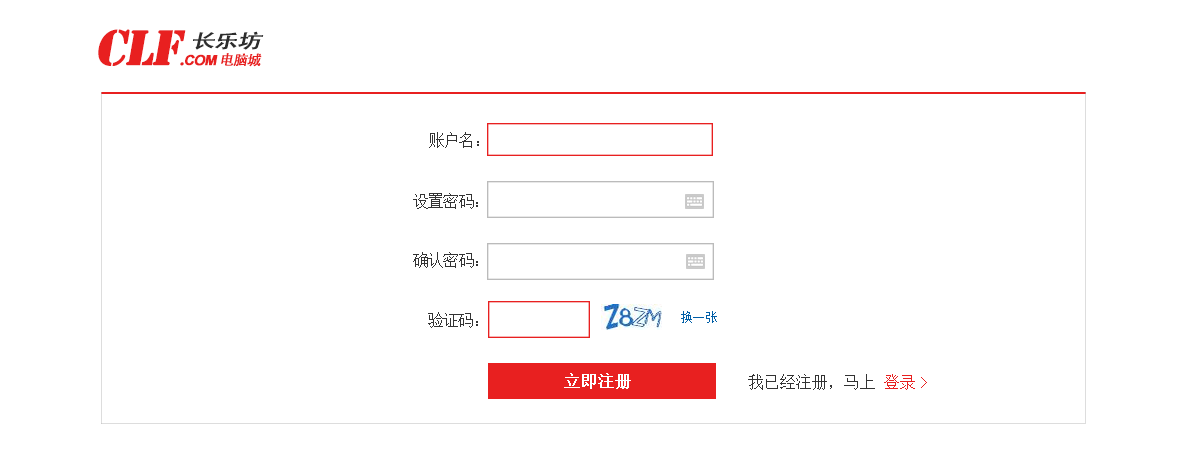
<style>
.page{position:relative;width:1200px;height:460px;background:#ffffff}
.page>*{position:absolute;margin:0}
.t1{font:46px "StencilStd";letter-spacing:-0.05em;color:#e82020;font-weight:bold;font-style:italic}
.t2{font:14px "StencilStd";letter-spacing:-0.05em;color:#e82020;font-weight:bold;font-style:italic}
.t3{font:14px "Arial-BoldMT";letter-spacing:-0.05em;color:#e82020;font-weight:bold;font-style:italic}
.t4{font:14px "AdobeHeitiStd-Regular";letter-spacing:-0.05em;color:#e82020;font-weight:bold;font-style:italic}
.t5{font:18.9px "AdobeHeitiStd-Regular";letter-spacing:-0.05em;color:#2d2d2d;font-weight:bold;font-style:italic;scale:1.26 1}
.t6{font:16px "SimSun";letter-spacing:-0.05em;color:#333333}
.t7{font:12px "SimSun";letter-spacing:-0.05em;color:#333333}
.t8{font:13.3px "SimSun";letter-spacing:-0.05em;color:#005ea7}
.t9{font:12px "SimSun";color:#ffffff;font-weight:bold}
.t10{font:16px "SimSun";color:#333333}
.t11{font:16px "SimSun";color:#e82020}
</style>
<div class="page">
<p class="t1" style="left:98px;top:29px;width:164px;height:38px">CLF<span class="t2">.</span><span class="t3">COM</span><span class="t4">电脑城</span></p>
<p class="t5" style="left:193px;top:31px;width:71px;height:19px">长乐坊</p>
<p class="t6" style="left:429px;top:132px;width:50px;height:16px">账户名：</p>
<p class="t7" style="left:413px;top:193px;width:65px;height:16px">设置密码：</p>
<p class="t7" style="left:413px;top:252px;width:65px;height:16px">确认密码：</p>
<p class="t7" style="left:428px;top:312px;width:50px;height:16px">验证码：</p>
<p class="t8" style="left:681px;top:311px;width:36px;height:12px">换一张</p>
<p class="t9" style="left:564px;top:373px;width:67px;height:16px">立即注册</p>
<p class="t10" style="left:748px;top:374px;width:179px;height:16px">我已经注册，马上 <span class="t11">登录&gt;</span></p>
</div>
